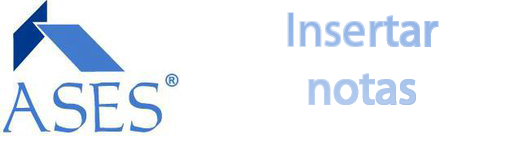
<style>
.page{position:relative;width:510px;height:152px;background:#ffffff}
.page>*{position:absolute;margin:0}
.t1{font:48px "MyriadPro-Regular";color:#9abae8}
</style>
<div class="page">
<p class="t1" style="left:288px;top:13px;width:150px;height:91px;text-align:center">Insertar<br>notas</p>
</div>
